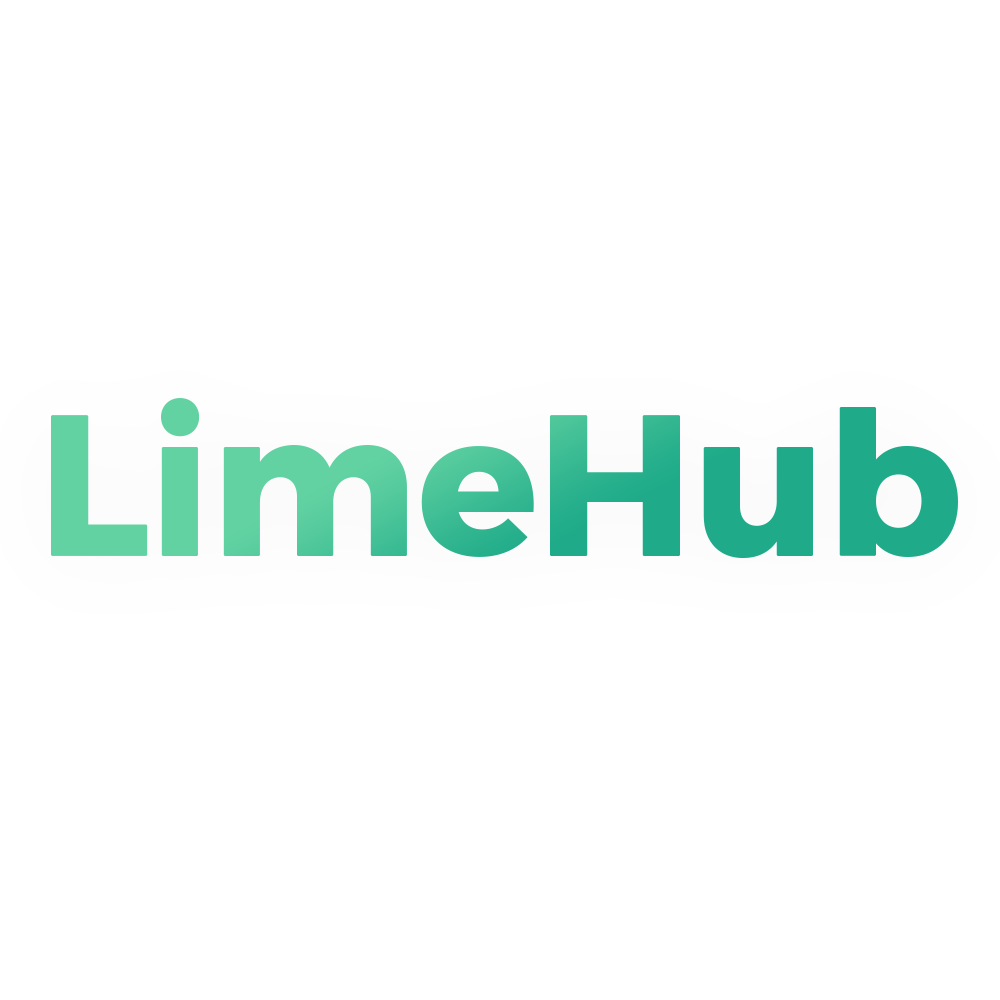
<style>
.page{position:relative;width:1000px;height:1000px;background:#ffffff}
.page>*{position:absolute;margin:0}
.t1{font:198.4px "TruenoBd";letter-spacing:-0.025em;font-weight:bold}
</style>
<div class="page">
<p class="t1" style="left:51px;top:398px;width:907px;height:160px">LimeHub</p>
</div>
